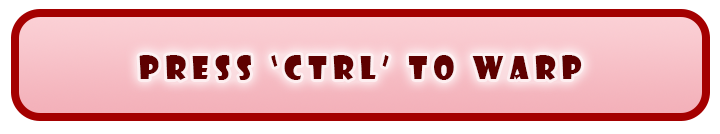
<style>
.page{position:relative;width:720px;height:134px}
.page>*{position:absolute;margin:0}
.t1{font:52.1px "ShowcardGothic-Reg";letter-spacing:0.2em;color:#5e0000}
</style>
<div class="page">
<p class="t1" style="left:139px;top:55px;width:443px;height:25px">Press ‘Ctrl’ to Warp</p>
</div>
